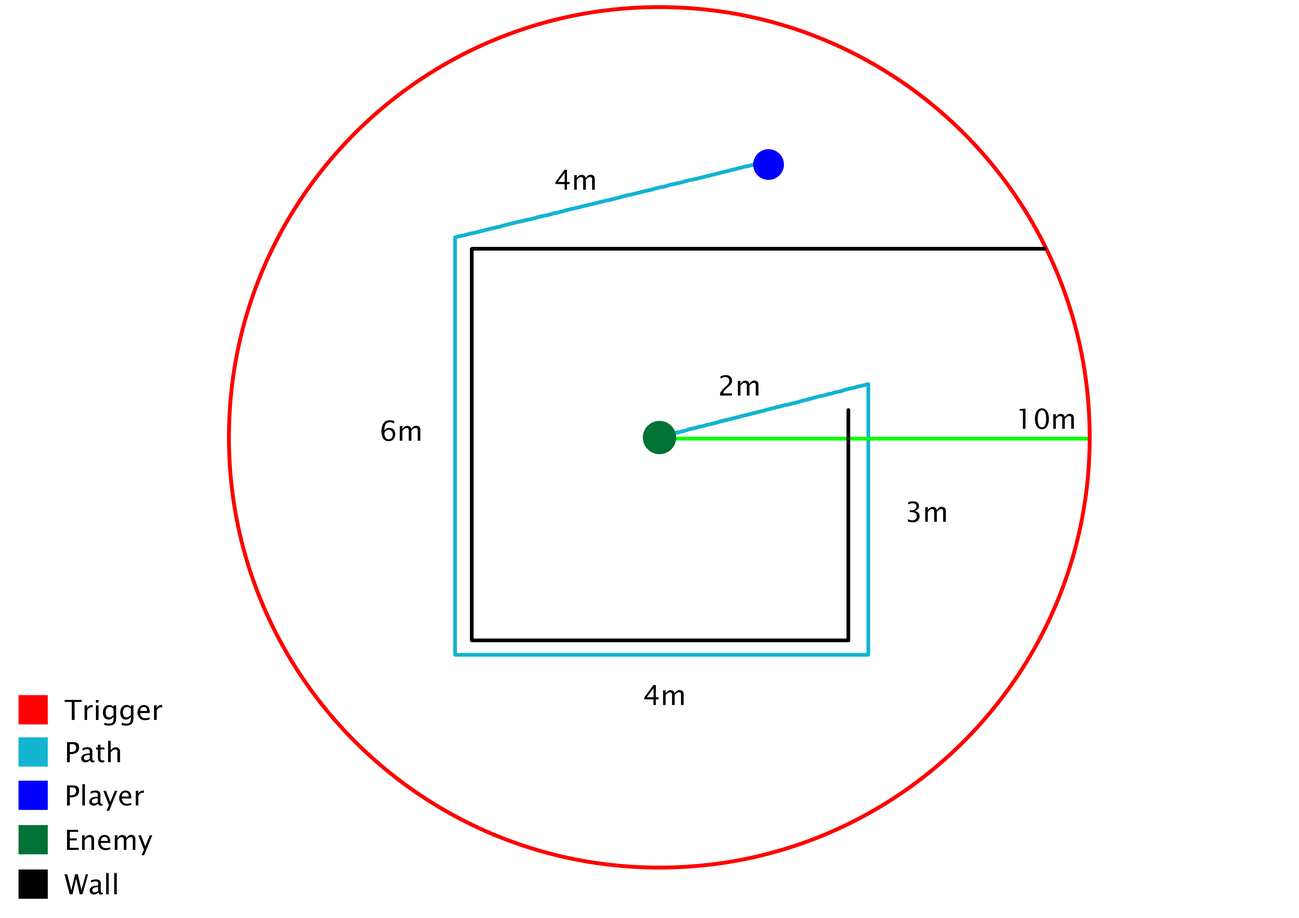
<style>
.page{position:relative;width:1299px;height:918px;background:#ffffff}
.page>*{position:absolute;margin:0}
.t1{font:27.8px "LucidaSans";color:#000000}
</style>
<div class="page">
<p class="t1" style="left:555px;top:170px;width:40px;height:20px">4m</p>
<p class="t1" style="left:720px;top:375px;width:39px;height:21px">2m</p>
<p class="t1" style="left:1019px;top:408px;width:55px;height:21px">10m</p>
<p class="t1" style="left:381px;top:420px;width:40px;height:21px">6m</p>
<p class="t1" style="left:907px;top:501px;width:39px;height:21px">3m</p>
<p class="t1" style="left:644px;top:685px;width:40px;height:20px">4m</p>
<p class="t1" style="left:64px;top:700px;width:98px;height:26px">Trigger</p>
<p class="t1" style="left:67px;top:741px;width:53px;height:22px">Path</p>
<p class="t1" style="left:67px;top:784px;width:77px;height:27px">Player</p>
<p class="t1" style="left:67px;top:830px;width:86px;height:26px">Enemy</p>
<p class="t1" style="left:64px;top:873px;width:53px;height:22px">Wall</p>
</div>
